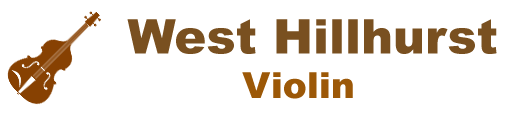
<style>
.page{position:relative;width:531px;height:115px;background:#ffffff}
.page>*{position:absolute;margin:0}
.t1{font:48px "Arial-Black";color:#795020}
.t2{font:36px "Arial-Black";color:#9c5807}
</style>
<div class="page">
<p class="t1" style="left:127px;top:19px;width:370px;height:35px">West Hillhurst</p>
<p class="t2" style="left:242px;top:72px;width:111px;height:27px">Violin</p>
</div>
